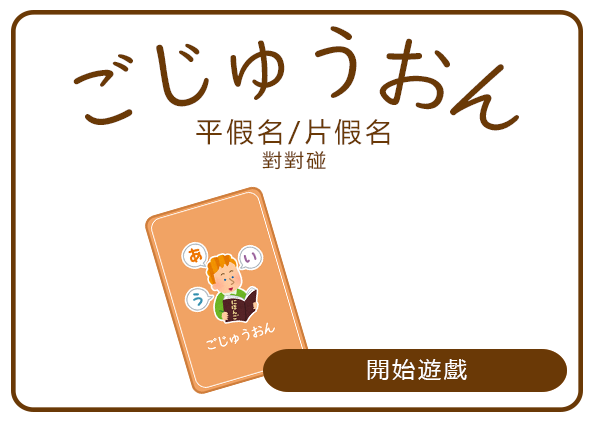
<style>
.page{position:relative;width:591px;height:423px;background:#ffffff}
.page>*{position:absolute;margin:0}
.t1{font:86.7px "UDDigiKyokashoN-R";letter-spacing:-0.14em;color:#6a3906}
.t2{font:26.5px/32px "MicrosoftYaHei";letter-spacing:0.14em;color:#6a3906}
.t3{font:18.9px/32px "MicrosoftYaHei";letter-spacing:0.14em;color:#6a3906}
.t4{font:21.6px "MicrosoftYaHei";letter-spacing:0.14em;color:#ffffff;scale:1.05 1}
</style>
<div class="page">
<p class="t1" style="left:73px;top:26px;width:446px;height:105px">ごじゅうおん</p>
<p class="t2" style="left:196px;top:119px;width:194px;height:51px;text-align:center">平假名/片假名<br><span class="t3">對對碰</span></p>
<p class="t4" style="left:367px;top:359px;width:100px;height:21px">開始遊戲</p>
</div>
